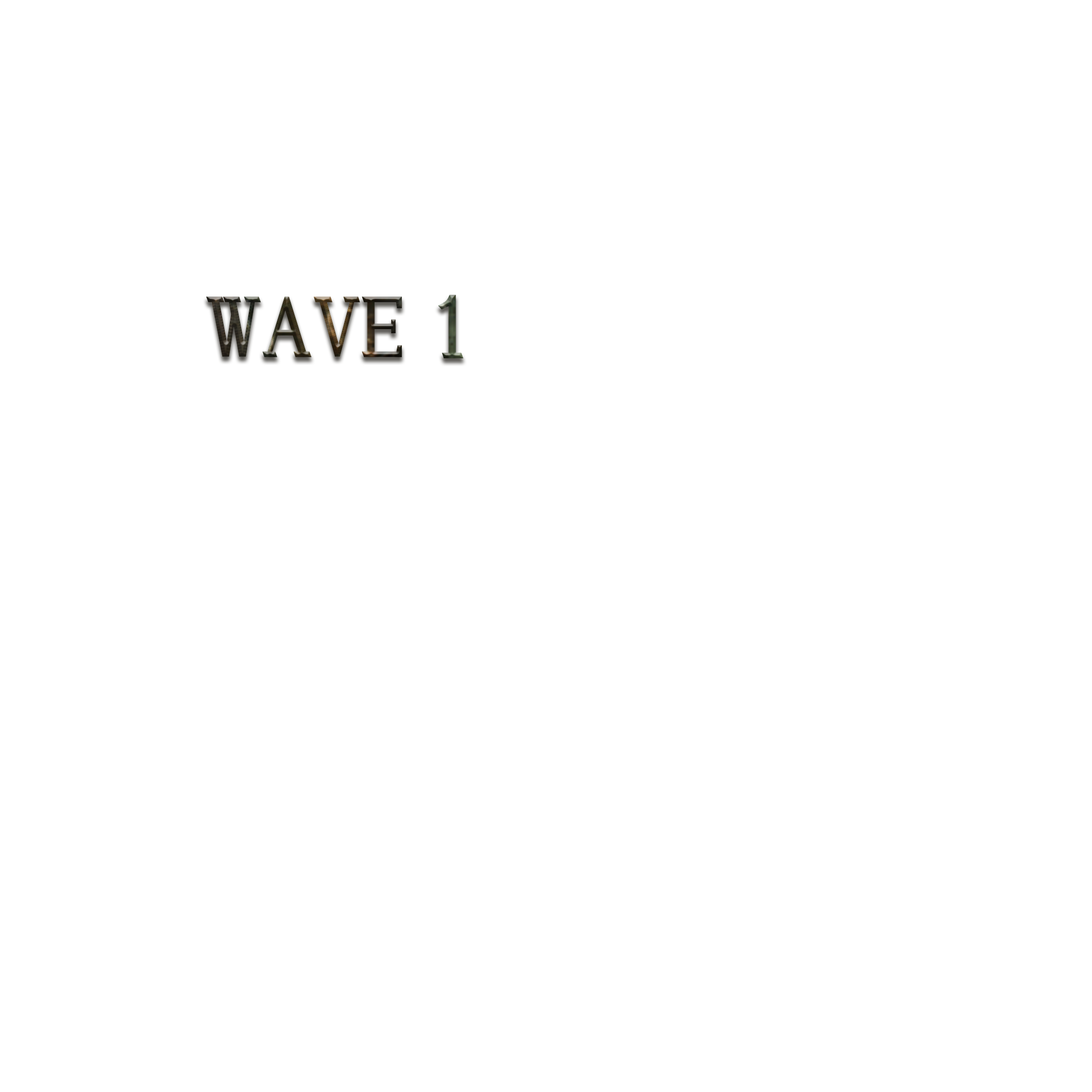
<style>
.page{position:relative;width:1092px;height:1092px;background:#ffffff}
.page>*{position:absolute;margin:0}
.t1{font:76.8px "HGSSoeiPresenceEB"}
</style>
<div class="page">
<p class="t1" style="left:206px;top:294px;width:257px;height:64px">WAVE 1</p>
</div>
